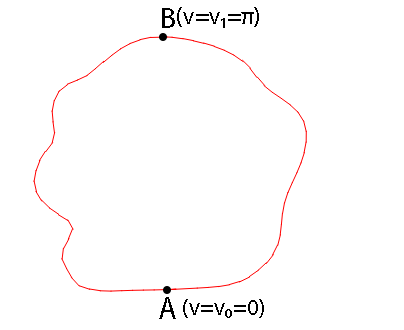
<style>
.page{position:relative;width:404px;height:330px;background:#ffffff}
.page>*{position:absolute;margin:0}
.t1{font:29.8px "MyriadPro-Regular";color:#000000}
.t2{font:24.6px "MyriadPro-Regular";color:#000000}
.t3{font:31.8px "MyriadPro-Regular";color:#000000;scale:0.93 1}
.t4{font:23.2px "MyriadPro-Regular";color:#000000}
</style>
<div class="page">
<p class="t1" style="left:162px;top:8px;width:13px;height:20px">B</p>
<p class="t2" style="left:177px;top:7px;width:82px;height:21px">(v=v1=π)</p>
<p class="t3" style="left:159px;top:297px;width:17px;height:22px">A</p>
<p class="t4" style="left:183px;top:299px;width:81px;height:19px">(v=v0=0)</p>
</div>
